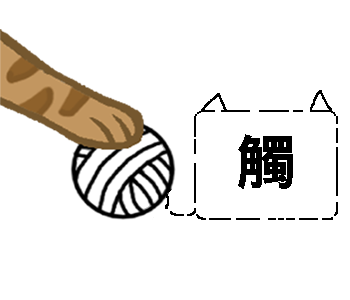
<style>
.page{position:relative;width:350px;height:300px;background:#ffffff}
.page>*{position:absolute;margin:0}
.t1{font:60px "DFNHei-W9-WIN-BF";color:#000000}
</style>
<div class="page">
<p class="t1" style="left:238px;top:134px;width:55px;height:55px">觸</p>
</div>
